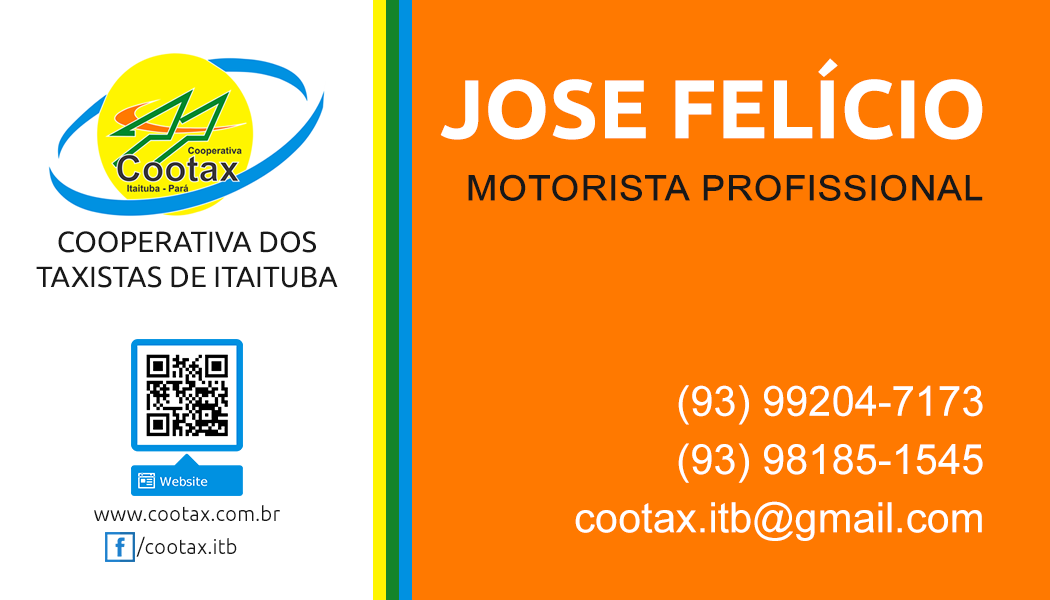
<style>
.page{position:relative;width:1050px;height:600px;background:#ff7900}
.page>*{position:absolute;margin:0}
.t1{font:83.3px "Ubuntu-Bold";color:#ffffff;text-transform:uppercase}
.t2{font:45.8px "ArialMT";color:#181818;font-variant:small-caps}
.t3{font:29.2px "Ubuntu";color:#181818;text-transform:uppercase}
.t4{font:41.7px/58.3px "ArialMT";color:#ffffff}
.t5{font:20.8px "Ubuntu-Light";color:#181818}
.t6{font:20.8px "Ubuntu-Light";color:#181818;text-transform:uppercase}
</style>
<div class="page">
<p class="t1" style="left:440px;top:58px;width:543px;height:82px">Jose felício</p>
<p class="t2" style="left:468px;top:174px;width:515px;height:27px">motorista profissional</p>
<p class="t3" style="left:36px;top:231px;width:302px;height:57px;text-align:center">Cooperativa dos<br>Taxistas de Itaituba</p>
<p class="t4" style="left:575px;top:385px;width:408px;height:156px;text-align:right">(93) 99204-7173<br>(93) 98185-1545<br>cootax.itb@gmail.com</p>
<p class="t5" style="left:94px;top:505px;width:186px;height:16px">www.cootax.com.br</p>
<p class="t5" style="left:136px;top:536px;width:101px;height:21px"><span class="t6">/</span>cootax.itb</p>
</div>
